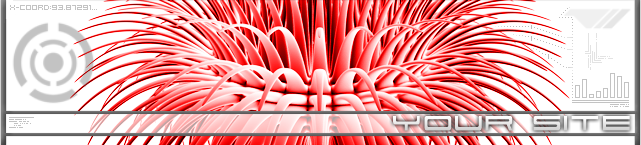
<style>
.page{position:relative;width:641px;height:145px;background:#ffffff}
.page>*{position:absolute;margin:0}
.t1{font:30px "911Porscha";letter-spacing:0.05em;color:#ebebeb}
</style>
<div class="page">
<p class="t1" style="left:393px;top:116px;width:237px;height:15px">your site</p>
</div>
